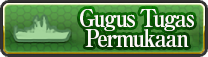
<style>
.page{position:relative;width:208px;height:57px}
.page>*{position:absolute;margin:0}
.t1{font:24px/20px "RyuminPro-ExBold";letter-spacing:-0.08em;color:#fff9f9;scale:0.9 1}
</style>
<div class="page">
<p class="t1" style="left:80px;top:9px;width:114px;height:38px;text-align:center">Gugus Tugas<br>Permukaan</p>
</div>
